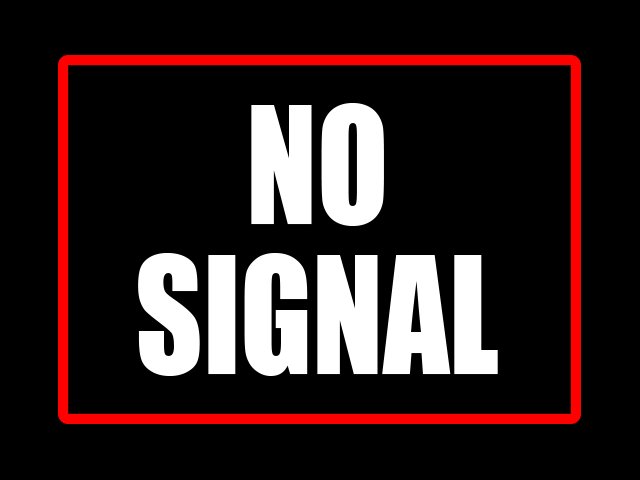
<style>
.page{position:relative;width:640px;height:480px;background:#000000}
.page>*{position:absolute;margin:0}
.t1{font:150px/150px "Impact";color:#ffffff;scale:0.87 1}
</style>
<div class="page">
<p class="t1" style="left:138px;top:103px;width:360px;height:273px;text-align:center">NO<br>SIGNAL</p>
</div>
